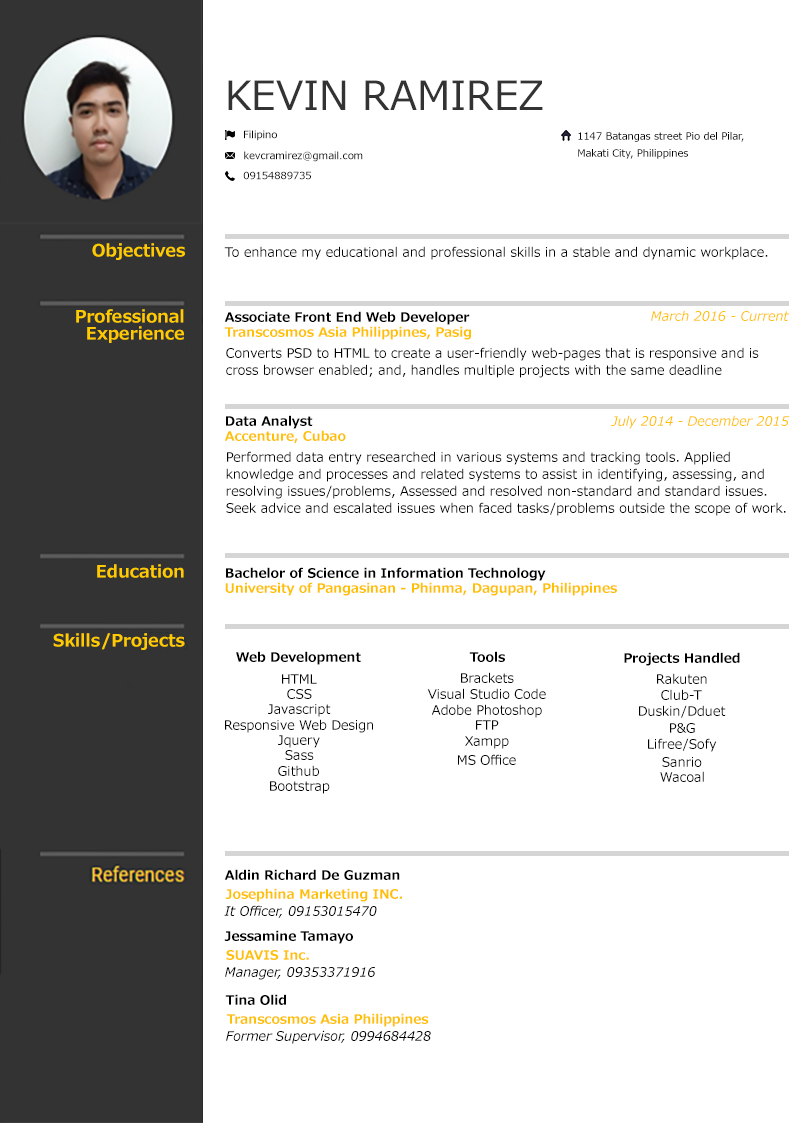
<style>
.page{position:relative;width:793px;height:1123px;background:#ffffff}
.page>*{position:absolute;margin:0}
.t1{font:40px "Meiryo";color:#333333}
.t2{font:10px "Meiryo";color:#010101}
.t3{font:10px/17px "Meiryo";color:#010101}
.t4{font:17px "Meiryo-Bold";color:#ffcb00}
.t5{font:13px "Meiryo";color:#000000}
.t6{font:17px/17px "Meiryo-Bold";color:#ffcb00}
.t7{font:13px "Meiryo-Bold";color:#000000}
.t8{font:13px "Meiryo-Italic";color:#ffc000}
.t9{font:13px "Meiryo-Bold";color:#ffc000}
.t10{font:13px/17px "Meiryo";color:#000000}
.t11{font:13px "Meiryo-Italic";color:#000000}
</style>
<div class="page">
<p class="t1" style="left:228px;top:80px;width:315px;height:30px">KEVIN RAMIREZ</p>
<p class="t2" style="left:244px;top:130px;width:33px;height:11px">Filipino</p>
<p class="t3" style="left:578px;top:132px;width:166px;height:27px">1147 Batangas street Pio del Pilar, <br>Makati City, Philippines</p>
<p class="t2" style="left:244px;top:151px;width:119px;height:11px">kevcramirez@gmail.com</p>
<p class="t2" style="left:243px;top:171px;width:68px;height:9px">09154889735</p>
<p class="t4" style="left:92px;top:243px;width:93px;height:17px">Objectives</p>
<p class="t5" style="left:224px;top:246px;width:544px;height:14px">To enhance my educational and professional skills in a stable and dynamic workplace.</p>
<p class="t6" style="left:76px;top:309px;width:108px;height:34px;text-align:right">Professional<br>Experience</p>
<p class="t7" style="left:224px;top:311px;width:246px;height:14px">Associate Front End Web Developer</p>
<p class="t8" style="left:651px;top:310px;width:139px;height:11px">March 2016 - Current</p>
<p class="t9" style="left:224px;top:326px;width:247px;height:14px">Transcosmos Asia Philippines, Pasig</p>
<p class="t10" style="left:226px;top:347px;width:533px;height:31px">Converts PSD to HTML to create a user-friendly web-pages that is responsive and is <br>cross browser enabled; and, handles multiple projects with the same deadline</p>
<p class="t7" style="left:226px;top:415px;width:87px;height:14px">Data Analyst</p>
<p class="t8" style="left:611px;top:415px;width:179px;height:14px">July 2014 - December 2015</p>
<p class="t9" style="left:224px;top:430px;width:122px;height:14px">Accenture, Cubao</p>
<p class="t10" style="left:226px;top:451px;width:560px;height:65px">Performed data entry researched in various systems and tracking tools. Applied<br>knowledge and processes and related systems to assist in identifying, assessing, and <br>resolving issues/problems, Assessed and resolved non-standard and standard issues. <br>Seek advice and escalated issues when faced tasks/problems outside the scope of work.</p>
<p class="t4" style="left:97px;top:564px;width:87px;height:14px">Education</p>
<p class="t7" style="left:226px;top:567px;width:320px;height:14px">Bachelor of Science in Information Technology</p>
<p class="t9" style="left:225px;top:582px;width:392px;height:14px">University of Pangasinan - Phinma, Dagupan, Philippines</p>
<p class="t4" style="left:53px;top:633px;width:132px;height:17px">Skills/Projects</p>
<p class="t7" style="left:236px;top:651px;width:125px;height:14px">Web Development</p>
<p class="t7" style="left:469px;top:651px;width:36px;height:11px">Tools</p>
<p class="t7" style="left:624px;top:652px;width:116px;height:14px">Projects Handled</p>
<p class="t5" style="left:282px;top:674px;width:35px;height:10px">HTML</p>
<p class="t5" style="left:461px;top:672px;width:53px;height:11px">Brackets</p>
<p class="t5" style="left:657px;top:673px;width:50px;height:11px">Rakuten</p>
<p class="t5" style="left:287px;top:689px;width:25px;height:10px">CSS</p>
<p class="t5" style="left:427px;top:688px;width:119px;height:11px">Visual Studio Code</p>
<p class="t5" style="left:661px;top:689px;width:41px;height:11px">Club-T</p>
<p class="t5" style="left:268px;top:704px;width:63px;height:13px">Javascript</p>
<p class="t5" style="left:431px;top:704px;width:111px;height:14px">Adobe Photoshop</p>
<p class="t5" style="left:639px;top:705px;width:87px;height:13px">Duskin/Dduet</p>
<p class="t5" style="left:225px;top:719px;width:148px;height:14px">Responsive Web Design</p>
<p class="t5" style="left:476px;top:720px;width:23px;height:10px">FTP</p>
<p class="t5" style="left:670px;top:723px;width:25px;height:10px">P&amp;G</p>
<p class="t5" style="left:278px;top:735px;width:42px;height:13px">Jquery</p>
<p class="t5" style="left:465px;top:736px;width:44px;height:13px">Xampp</p>
<p class="t5" style="left:285px;top:750px;width:29px;height:10px">Sass</p>
<p class="t5" style="left:648px;top:738px;width:69px;height:14px">Lifree/Sofy</p>
<p class="t5" style="left:458px;top:754px;width:58px;height:11px">MS Office</p>
<p class="t5" style="left:662px;top:757px;width:40px;height:10px">Sanrio</p>
<p class="t5" style="left:278px;top:765px;width:41px;height:11px">Github</p>
<p class="t5" style="left:660px;top:771px;width:44px;height:11px">Wacoal</p>
<p class="t5" style="left:270px;top:781px;width:60px;height:13px">Bootstrap</p>
<p class="t7" style="left:224px;top:869px;width:176px;height:11px">Aldin Richard De Guzman</p>
<p class="t9" style="left:225px;top:888px;width:177px;height:14px">Josephina Marketing INC.</p>
<p class="t11" style="left:224px;top:905px;width:153px;height:13px">It Officer, 09153015470</p>
<p class="t7" style="left:224px;top:930px;width:129px;height:14px">Jessamine Tamayo</p>
<p class="t9" style="left:226px;top:950px;width:83px;height:10px">SUAVIS Inc.</p>
<p class="t11" style="left:225px;top:967px;width:150px;height:13px">Manager, 09353371916</p>
<p class="t7" style="left:225px;top:994px;width:61px;height:11px">Tina Olid</p>
<p class="t9" style="left:226px;top:1013px;width:203px;height:14px">Transcosmos Asia Philippines</p>
<p class="t11" style="left:226px;top:1030px;width:205px;height:14px">Former Supervisor, 0994684428</p>
</div>
